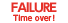
<style>
.page{position:relative;width:68px;height:23px;background:#ffffff}
.page>*{position:absolute;margin:0}
.t1{font:12px "UDShinGoPro-Bold";letter-spacing:-0.08em;color:#e53028}
</style>
<div class="page">
<p class="t1" style="left:11px;top:2px;width:46px;height:11px">FAILURE</p>
</div>
